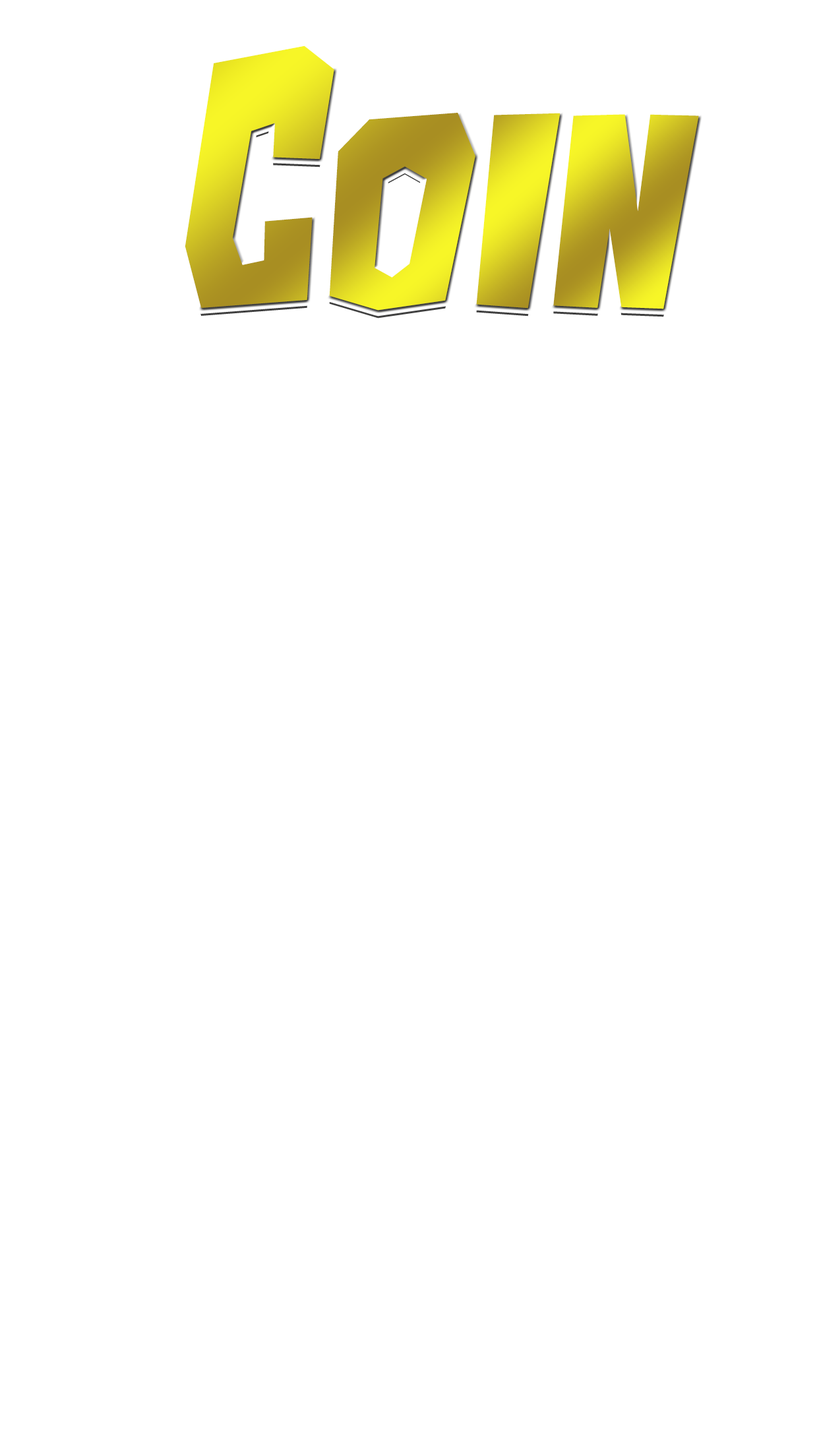
<style>
.page{position:relative;width:819px;height:1456px;background:#ffffff}
.page>*{position:absolute;margin:0}
.t1{font:238px "Kaiju-Monster__G";scale:1.49 1}
.t2{font:317.3px "Kaiju-Monster__G";scale:1.12 1}
</style>
<div class="page">
<p class="t1" style="left:185px;top:45px;width:514px;height:266px"><span class="t2">C</span>OIN</p>
</div>
